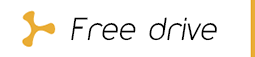
<style>
.page{position:relative;width:255px;height:57px;background:#ffffff}
.page>*{position:absolute;margin:0}
.t1{font:26.5px "359-CAI978";color:#000000}
</style>
<div class="page">
<p class="t1" style="left:71px;top:17px;width:146px;height:24px">Free drive</p>
</div>
